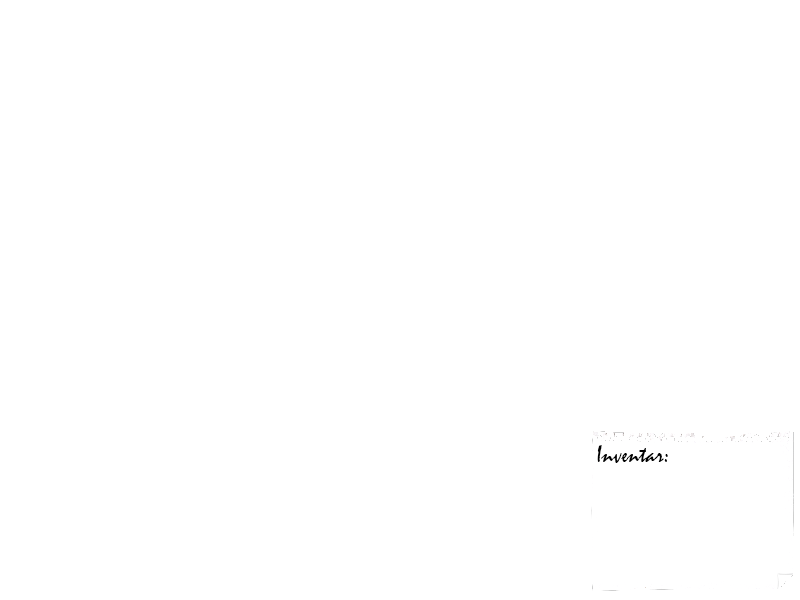
<style>
.page{position:relative;width:800px;height:600px;background:#ffffff}
.page>*{position:absolute;margin:0}
.t1{font:25px "Mistral";color:#000000}
</style>
<div class="page">
<p class="t1" style="left:597px;top:445px;width:71px;height:18px">Inventar:</p>
</div>
